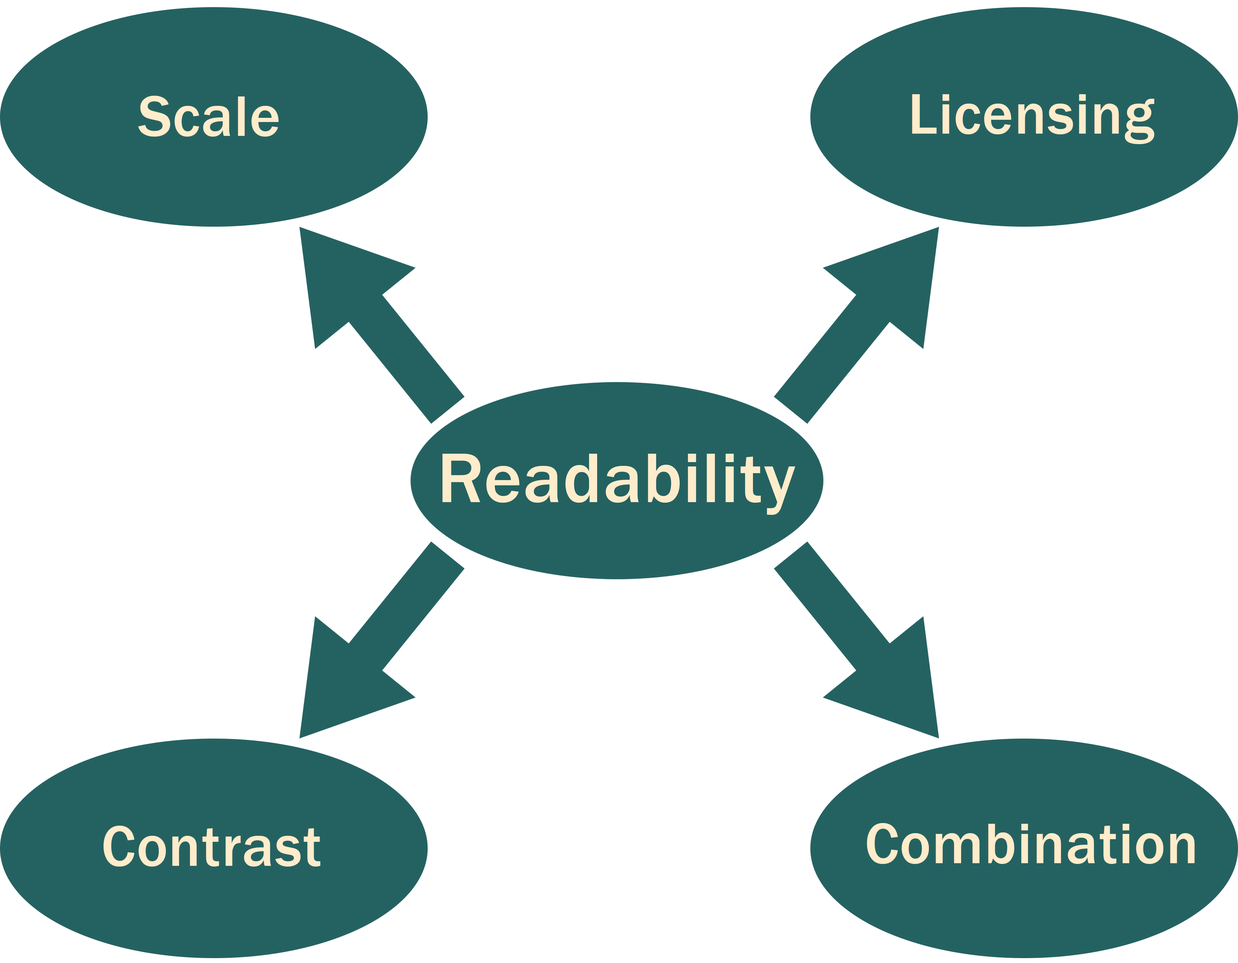
<style>
.page{position:relative;width:1238px;height:963px;background:#ffffff}
.page>*{position:absolute;margin:0}
.t1{font:59.4px "FranklinGothic-Medium";letter-spacing:0.014em;color:#ffeccb}
</style>
<div class="page">
<p class="t1" style="left:138px;top:96px;width:141px;height:41px">Scale</p>
<p class="t1" style="left:912px;top:94px;width:243px;height:50px">Licensing</p>
<p class="t1" style="left:104px;top:826px;width:216px;height:40px">Contrast</p>
<p class="t1" style="left:867px;top:823px;width:328px;height:41px">Combination</p>
</div>
